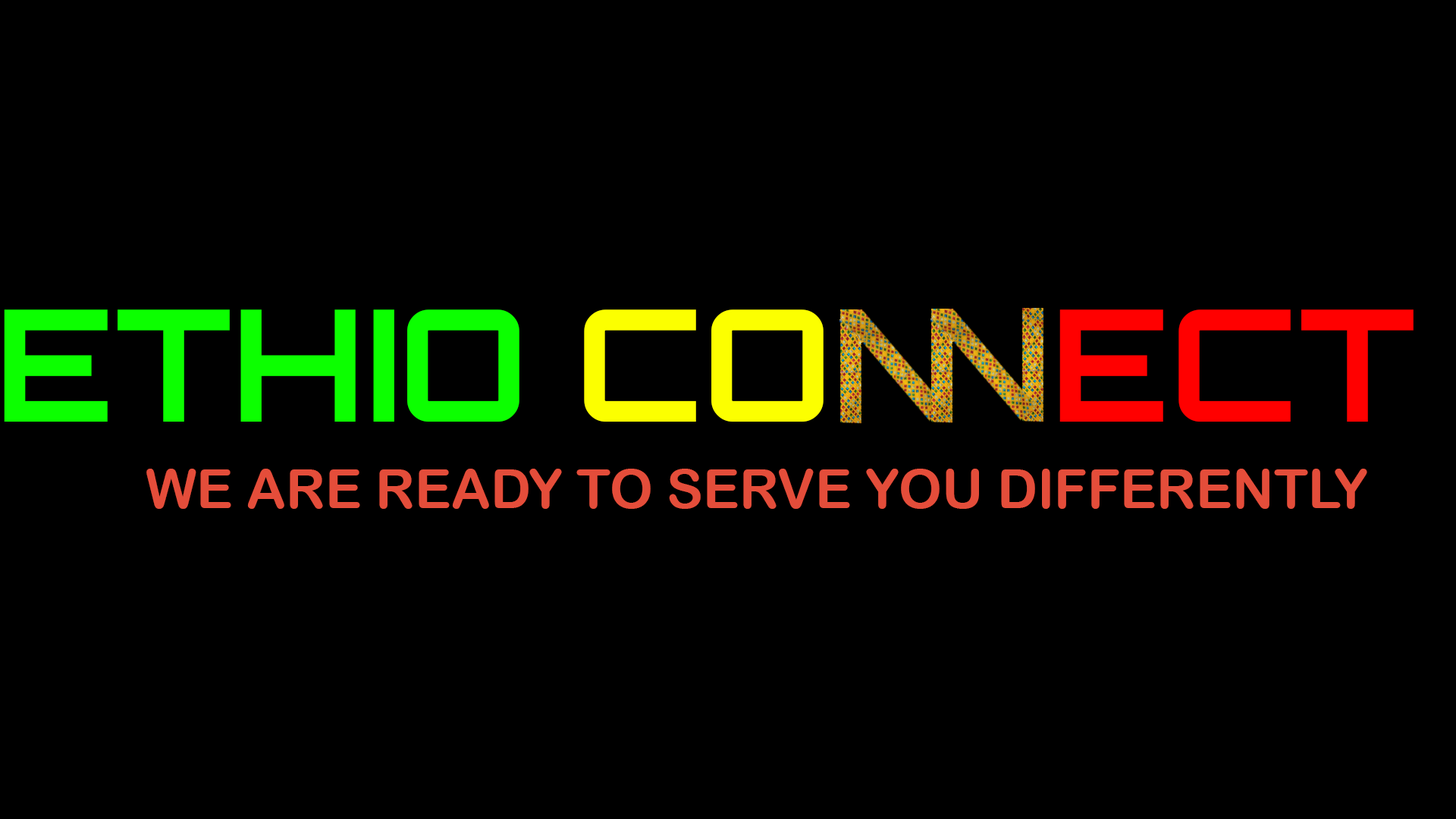
<style>
.page{position:relative;width:1456px;height:819px;background:#000000}
.page>*{position:absolute;margin:0}
.t1{font:155.5px "Orbitron-Bold";color:#0cff00}
.t2{font:155.5px "Orbitron-Bold";color:#fcff00}
.t3{font:155.5px "Orbitron-Bold";color:#ff0000}
.t4{font:54.6px "ArialRoundedMTBold";color:#e44d3a}
</style>
<div class="page">
<p class="t1" style="left:4px;top:309px;width:1410px;height:113px">ETHIO <span class="t2">CO      </span><span class="t3">ECT</span></p>
<p class="t4" style="left:146px;top:469px;width:1221px;height:40px">WE ARE READY TO SERVE YOU DIFFERENTLY</p>
</div>
